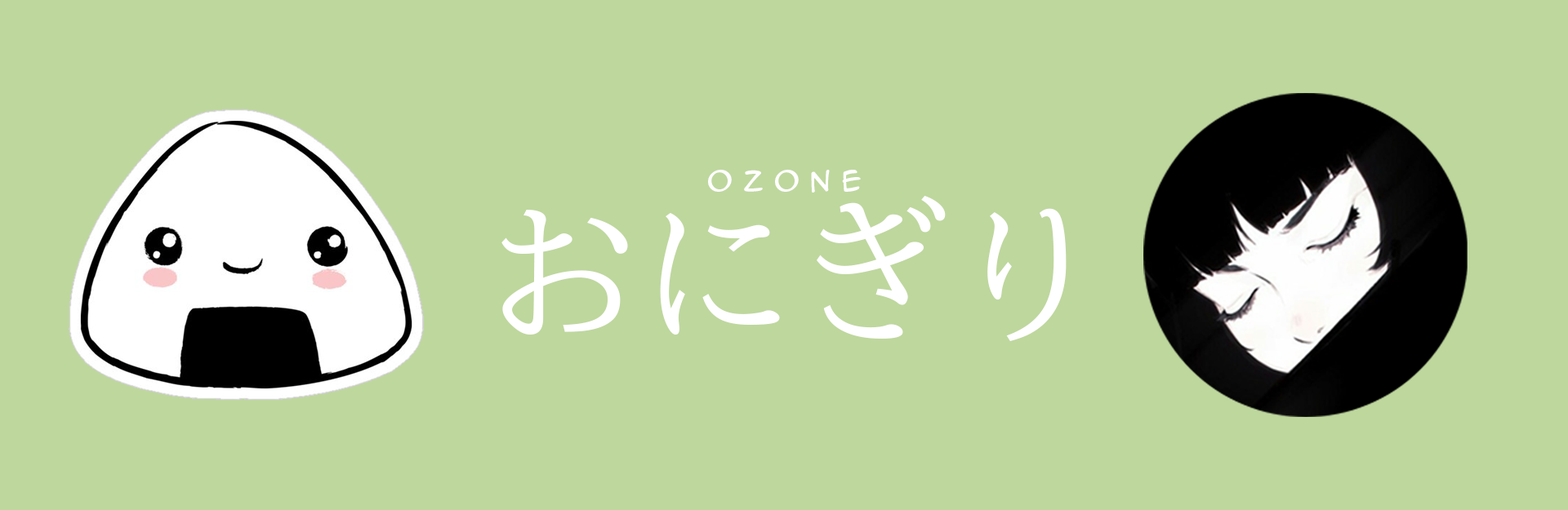
<style>
.page{position:relative;width:1568px;height:510px;background:#bed79d}
.page>*{position:absolute;margin:0}
.t1{font:25.8px "AnimeAce2.0BB";color:#ffffff}
.t2{font:155px "BIZ-UDMincho-Medium";color:#ffffff}
</style>
<div class="page">
<p class="t1" style="left:708px;top:170px;width:153px;height:23px">O Z O N E</p>
<p class="t2" style="left:501px;top:196px;width:566px;height:145px">おにぎり</p>
</div>
